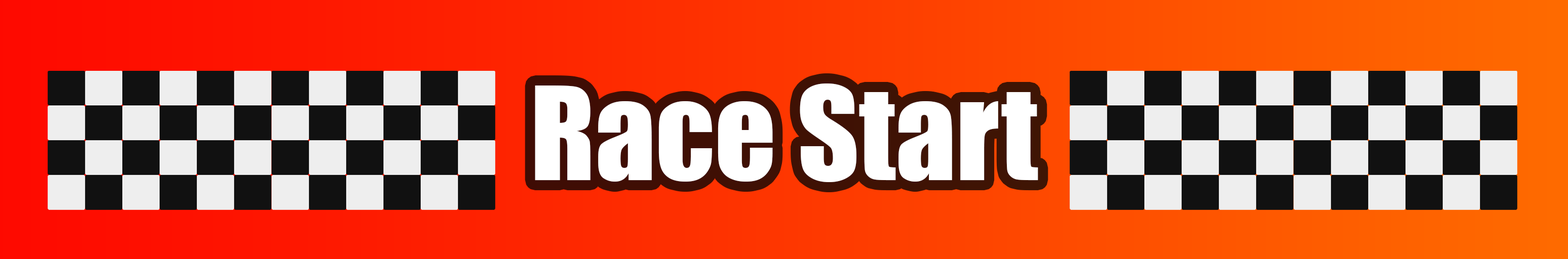
<style>
.page{position:relative;width:1568px;height:259px}
.page>*{position:absolute;margin:0}
.t1{font:119.9px "Impact";color:#ffffff}
</style>
<div class="page">
<p class="t1" style="left:535px;top:84px;width:503px;height:98px">Race Start</p>
</div>
